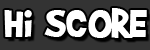
<style>
.page{position:relative;width:150px;height:50px;background:#333333}
.page>*{position:absolute;margin:0}
.t1{font:47px "BradyBunchRemastered";color:#ffffff}
</style>
<div class="page">
<p class="t1" style="left:4px;top:8px;width:143px;height:30px">Hi SCORE</p>
</div>
